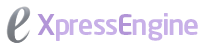
<style>
.page{position:relative;width:205px;height:50px;background:#ffffff}
.page>*{position:absolute;margin:0}
.t1{font:28px "NeoSans-Medium";letter-spacing:-0.05em;color:#c8b0e8}
.t2{font:28px "NeoSans-Medium";letter-spacing:-0.05em;color:#b295d7}
</style>
<div class="page">
<p class="t1" style="left:37px;top:13px;width:161px;height:28px"><span class="t2">X</span>press<span class="t2">E</span>ngine</p>
</div>
